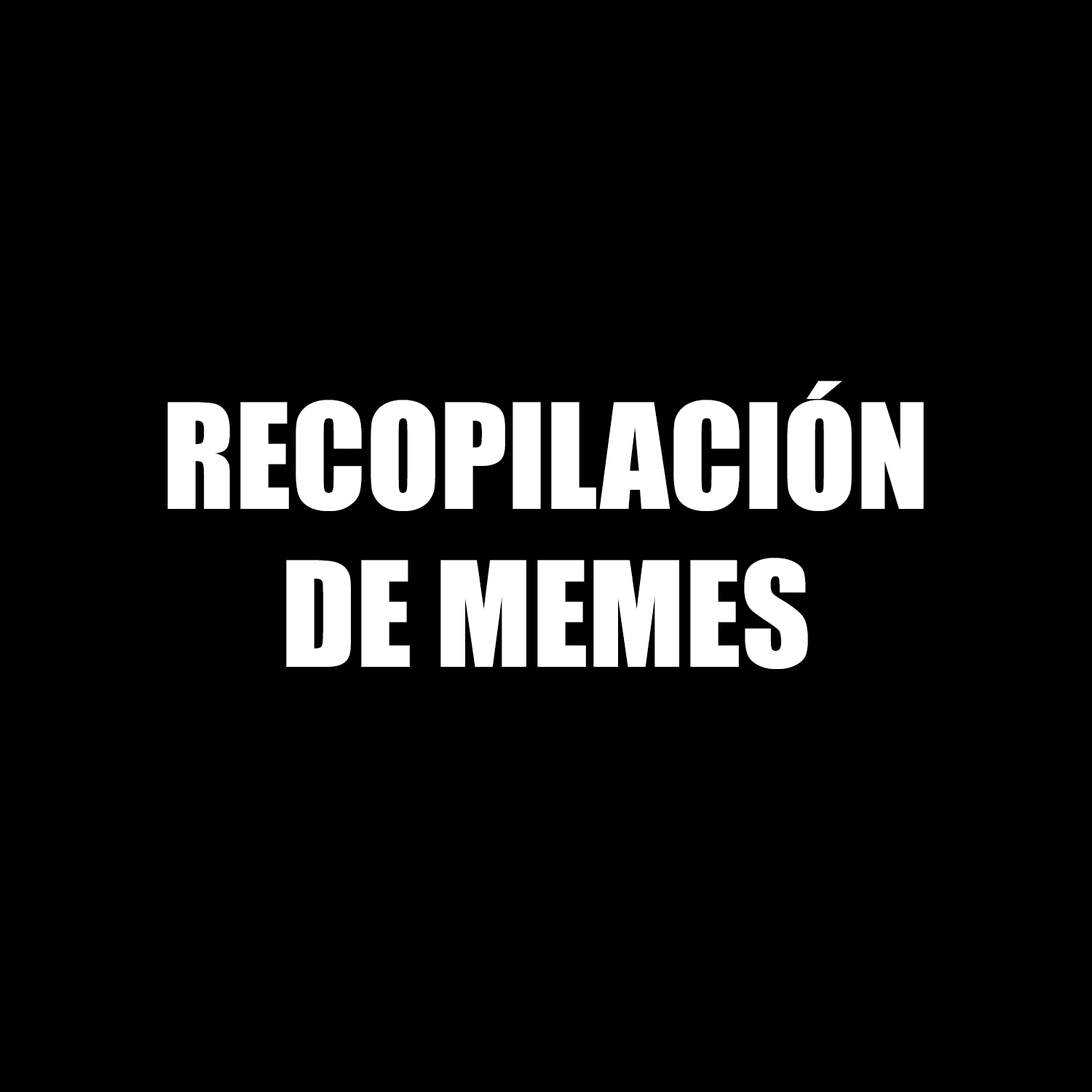
<style>
.page{position:relative;width:1092px;height:1092px;background:#000000}
.page>*{position:absolute;margin:0}
.t1{font:134.8px "Impact";color:#ffffff}
</style>
<div class="page">
<p class="t1" style="left:167px;top:381px;width:757px;height:288px;text-align:center">RECOPILACIÓN<br>DE MEMES</p>
</div>
